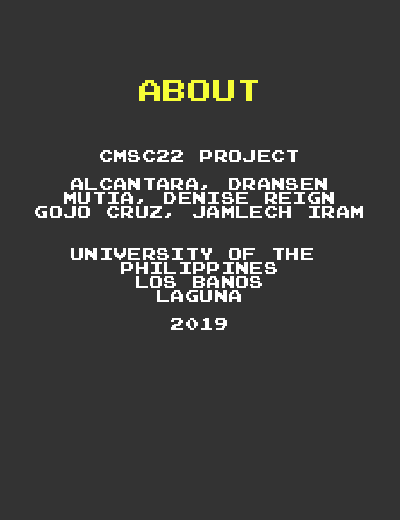
<style>
.page{position:relative;width:400px;height:520px;background:#333333}
.page>*{position:absolute;margin:0}
.t1{font:24px "Emulogic";letter-spacing:0.025em;color:#f6fd36}
.t2{font:14px/14px "Emulogic";letter-spacing:0.025em;color:#ffffff}
</style>
<div class="page">
<p class="t1" style="left:139px;top:80px;width:119px;height:21px">ABOUT</p>
<p class="t2" style="left:35px;top:150px;width:328px;height:180px;text-align:center">CMSC22 Project<br><br>Alcantara, Dransen<br>Mutia, Denise Reign<br>Gojo Cruz, Jamlech Iram<br><br><br>University of the <br>philippines<br>Los banos<br>laguna<br><br>2019</p>
</div>
